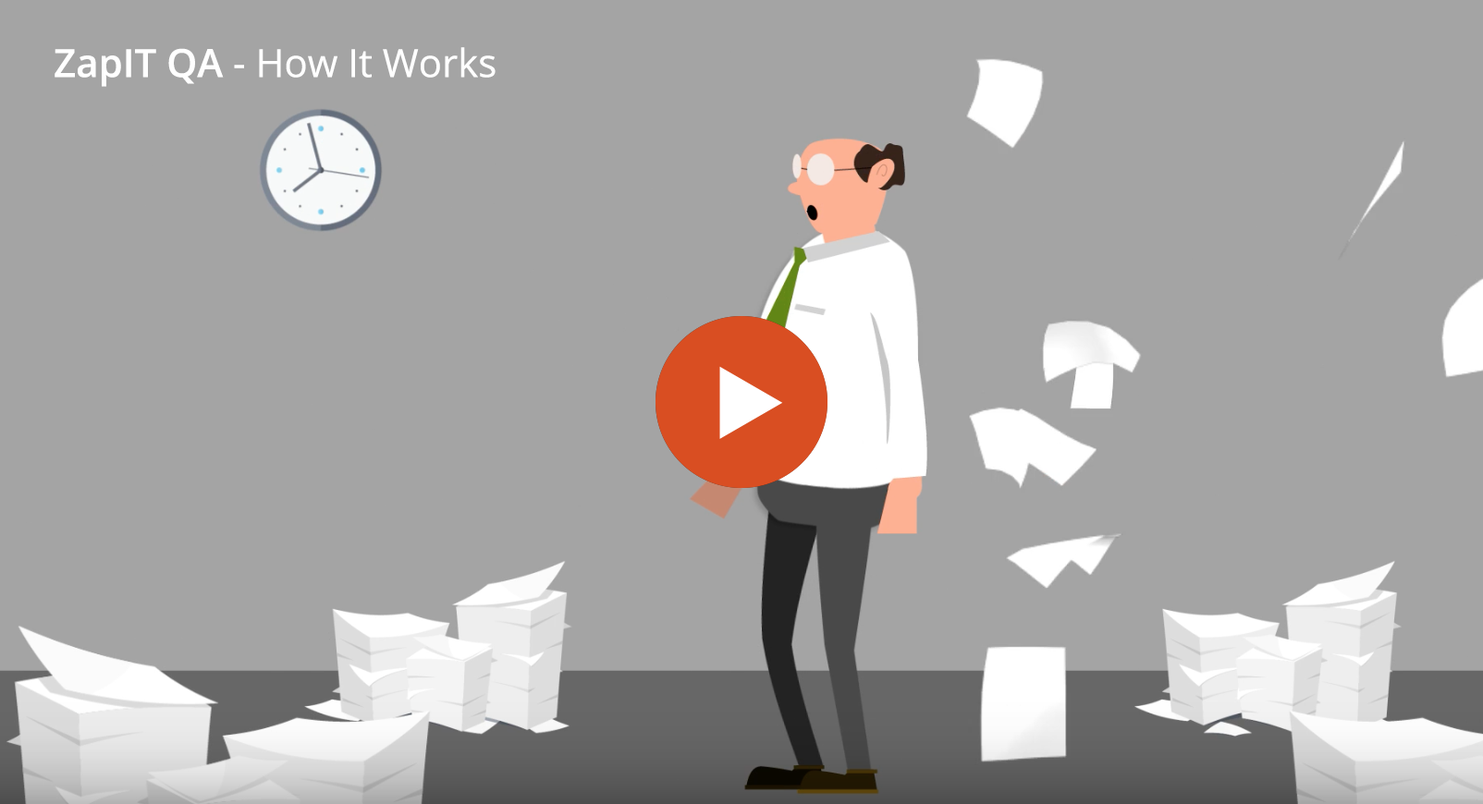
<style>
.page{position:relative;width:1483px;height:804px;background:#a4a4a4}
.page>*{position:absolute;margin:0}
.t1{font:38.8px "OpenSans";color:#ffffff}
.t2{font:38.8px "OpenSans-Semibold";color:#ffffff}
</style>
<div class="page">
<p class="t1" style="left:55px;top:47px;width:440px;height:40px"><span class="t2">ZapIT QA </span>- How It Works</p>
</div>
